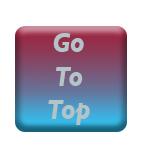
<style>
.page{position:relative;width:144px;height:144px;background:#ffffff}
.page>*{position:absolute;margin:0}
.t1{font:27.7px "GillSans-BoldItalic";color:#b4c3c8;scale:0.87 1}
</style>
<div class="page">
<p class="t1" style="left:48px;top:33px;width:42px;height:92px;text-align:center">Go <br>To<br>Top</p>
</div>
